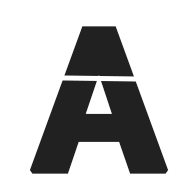
<style>
.page{position:relative;width:196px;height:196px;background:#ffffff}
.page>*{position:absolute;margin:0}
.t1{font:199.8px "Raleway-ExtraBold";color:#212121;font-weight:bold}
</style>
<div class="page">
<p class="t1" style="left:29px;top:26px;width:140px;height:148px">A</p>
</div>
